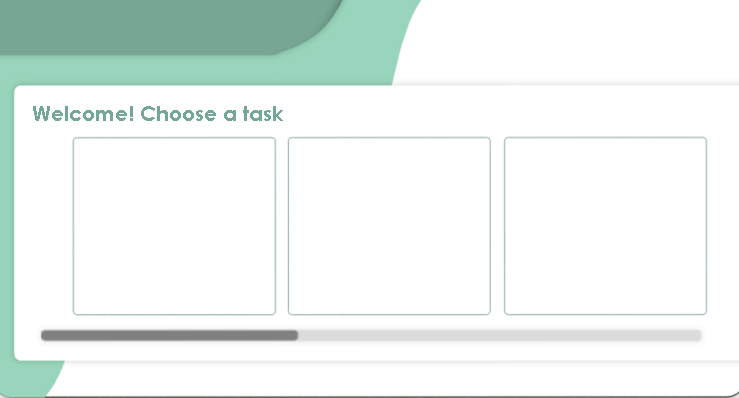
<style>
.page{position:relative;width:739px;height:398px;background:#ffffff}
.page>*{position:absolute;margin:0}
.t1{font:20.8px "CenturyGothic-Bold";color:#73a994}
</style>
<div class="page">
<p class="t1" style="left:33px;top:106px;width:250px;height:15px">Welcome! Choose a task</p>
</div>
